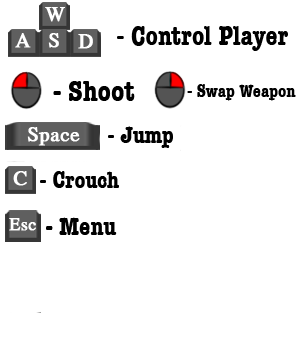
<style>
.page{position:relative;width:300px;height:360px;background:#ffffff}
.page>*{position:absolute;margin:0}
.t1{font:27.7px "AmericanTypewriter-CondensedBold";color:#000000}
.t2{font:30px "AmericanTypewriter-CondensedBold";color:#000000}
.t3{font:18.6px "AmericanTypewriter-CondensedBold";color:#000000}
.t4{font:24.6px "AmericanTypewriter-CondensedBold";color:#000000}
.t5{font:26px "AmericanTypewriter-CondensedBold";color:#000000}
</style>
<div class="page">
<p class="t1" style="left:117px;top:26px;width:171px;height:25px">- Control Player</p>
<p class="t2" style="left:53px;top:81px;width:82px;height:20px">- Shoot</p>
<p class="t3" style="left:187px;top:84px;width:109px;height:17px">- Swap Weapon</p>
<p class="t4" style="left:108px;top:126px;width:65px;height:22px">- Jump</p>
<p class="t4" style="left:40px;top:171px;width:79px;height:17px">- Crouch</p>
<p class="t5" style="left:46px;top:217px;width:71px;height:18px">- Menu</p>
</div>
